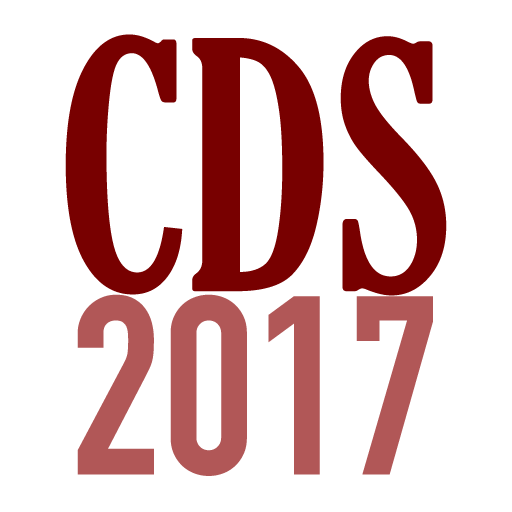
<style>
.page{position:relative;width:512px;height:512px;background:#ffffff}
.page>*{position:absolute;margin:0}
.t1{font:333.3px "GloucesterMT-ExtraCondensed";color:#780000}
.t2{font:250px "DINCondensed-Bold";color:#b15757}
</style>
<div class="page">
<p class="t1" style="left:65px;top:34px;width:382px;height:262px">CDS</p>
<p class="t2" style="left:77px;top:294px;width:356px;height:182px">2017</p>
</div>
